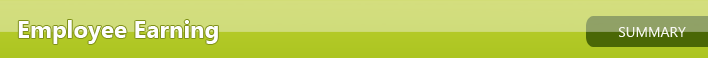
<style>
.page{position:relative;width:708px;height:58px}
.page>*{position:absolute;margin:0}
.t1{font:24px "SegoeUI-Bold";color:#fefefe}
.t2{font:14px "SegoeUI";color:#f6f7f1}
</style>
<div class="page">
<p class="t1" style="left:18px;top:20px;width:200px;height:24px">Employee Earning</p>
<p class="t2" style="left:619px;top:27px;width:67px;height:10px">SUMMARY</p>
</div>
